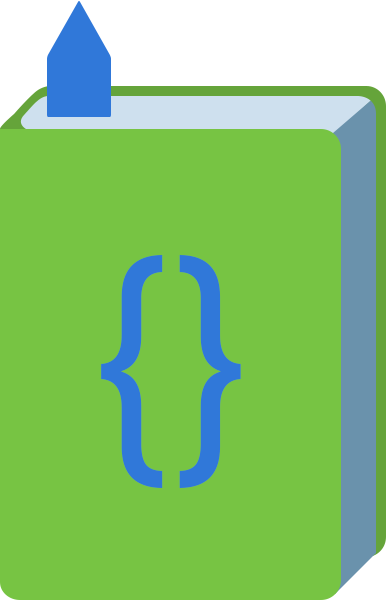
<style>
.page{position:relative;width:386px;height:600px;background:#77c443}
.page>*{position:absolute;margin:0}
.t1{font:271.2px "SegoeUI";color:#3078d9}
</style>
<div class="page">
<p class="t1" style="left:101px;top:255px;width:140px;height:233px">{}</p>
</div>
